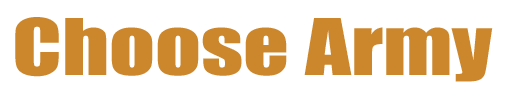
<style>
.page{position:relative;width:512px;height:96px;background:#ffffff}
.page>*{position:absolute;margin:0}
.t1{font:72px "Impact";color:#cc862b;scale:1.25 1}
</style>
<div class="page">
<p class="t1" style="left:15px;top:17px;width:478px;height:65px">Choose Army</p>
</div>
